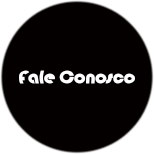
<style>
.page{position:relative;width:154px;height:154px;background:#050000}
.page>*{position:absolute;margin:0}
.t1{font:18px "Bauhaus93";color:#ffffff}
</style>
<div class="page">
<p class="t1" style="left:19px;top:70px;width:116px;height:14px">Fale Conosco</p>
</div>
